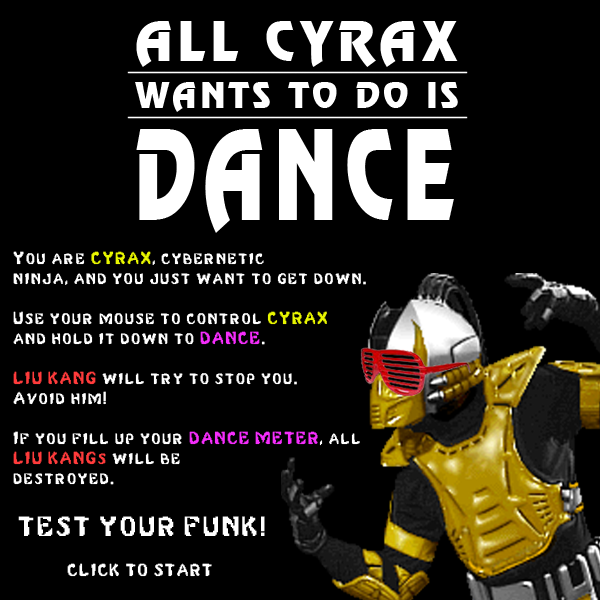
<style>
.page{position:relative;width:600px;height:600px;background:#000000}
.page>*{position:absolute;margin:0}
.t1{font:53.9px "Mortal-Kombat-3-Regular";letter-spacing:0.08em;color:#ffffff}
.t2{font:35px "Mortal-Kombat-3-Regular";letter-spacing:0.08em;color:#ffffff}
.t3{font:122.3px "Mortal-Kombat-3-Regular";letter-spacing:0.08em;color:#ffffff;scale:0.73 1}
.t4{font:16.7px "MortalKombat2";letter-spacing:0.08em;color:#ffffff}
.t5{font:16.7px "MortalKombat2";letter-spacing:0.08em;color:#e8f600}
.t6{font:16.7px "MortalKombat2";letter-spacing:0.08em;color:#f52dfc}
.t7{font:16.7px "MortalKombat2";letter-spacing:0.08em;color:#ff3b3b}
.t8{font:26.7px "MortalKombat2";letter-spacing:0.08em;color:#ffffff}
</style>
<div class="page">
<p class="t1" style="left:136px;top:21px;width:322px;height:46px">ALL CYRAX</p>
<p class="t2" style="left:135px;top:82px;width:323px;height:30px">WANTS TO DO IS</p>
<p class="t3" style="left:136px;top:129px;width:318px;height:104px">DANCE</p>
<p class="t4" style="left:13px;top:251px;width:353px;height:326px">You are <span class="t5">CYRAX</span>, cybernetic <br>ninja, and you just want to get down.<br><br>Use your mouse to control <span class="t5">CYRAX</span> <br>and hold it down to <span class="t6">DANCE</span>.<br><br><span class="t7">LIU KANG</span> will try to stop you. <br>Avoid him!<br><br>If you fill up your <span class="t6">DANCE METER</span>, all <br><span class="t7">LIU KANGs</span> will be <br>destroyed.<br><br> <span class="t8">TEST YOUR FUNK!<br></span><br>            CLICK TO START</p>
</div>
